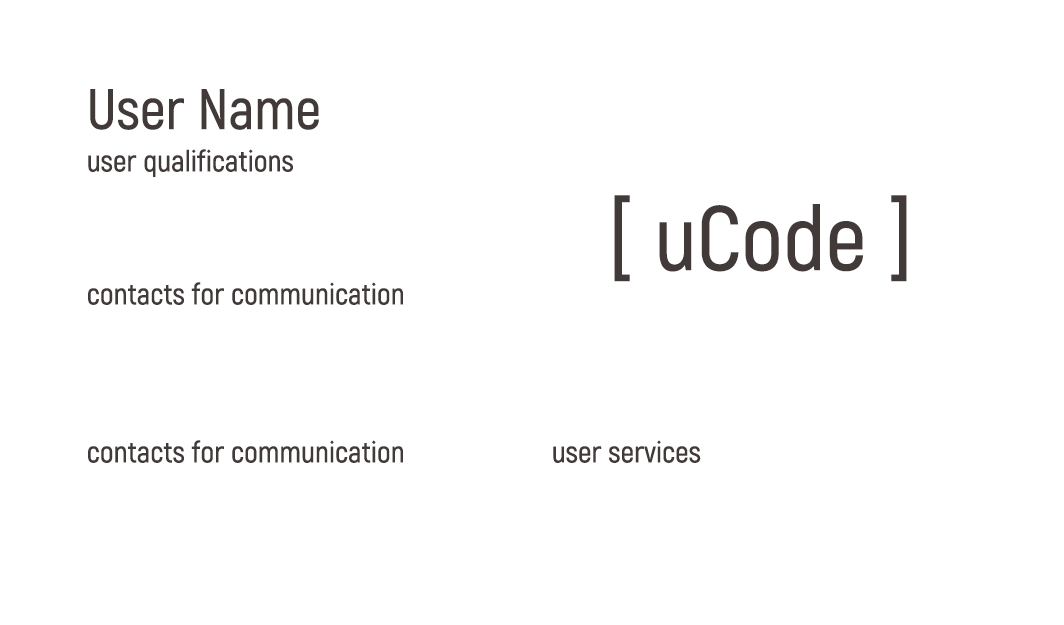
<style>
.page{position:relative;width:1064px;height:625px;background:#ffffff}
.page>*{position:absolute;margin:0}
.t1{font:57px "Akrobat-SemiBold";color:#423939}
.t2{font:30px "Akrobat-SemiBold";color:#423939}
.t3{font:91.2px "Akrobat-SemiBold";color:#423939}
</style>
<div class="page">
<p class="t1" style="left:90px;top:89px;width:229px;height:41px">User Name</p>
<p class="t2" style="left:88px;top:149px;width:205px;height:28px">user qualifications</p>
<p class="t3" style="left:614px;top:195px;width:293px;height:87px">[ uCode ]</p>
<p class="t2" style="left:88px;top:282px;width:315px;height:23px">contacts for communication</p>
<p class="t2" style="left:88px;top:440px;width:315px;height:23px">contacts for communication</p>
<p class="t2" style="left:553px;top:440px;width:148px;height:23px">user services</p>
</div>
